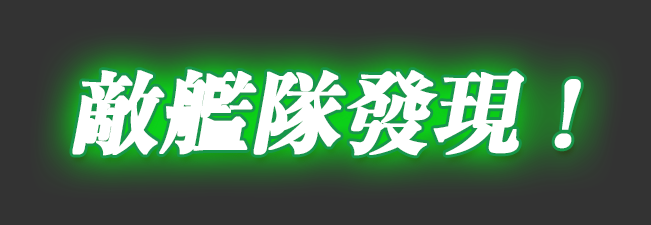
<style>
.page{position:relative;width:651px;height:225px;background:#333333}
.page>*{position:absolute;margin:0}
.t1{font:90px "RyuminPr6N-ExBold";letter-spacing:-0.025em;color:#ffffff;font-weight:bold;font-style:italic}
</style>
<div class="page">
<p class="t1" style="left:72px;top:69px;width:509px;height:87px">敵艦隊發現 !</p>
</div>
